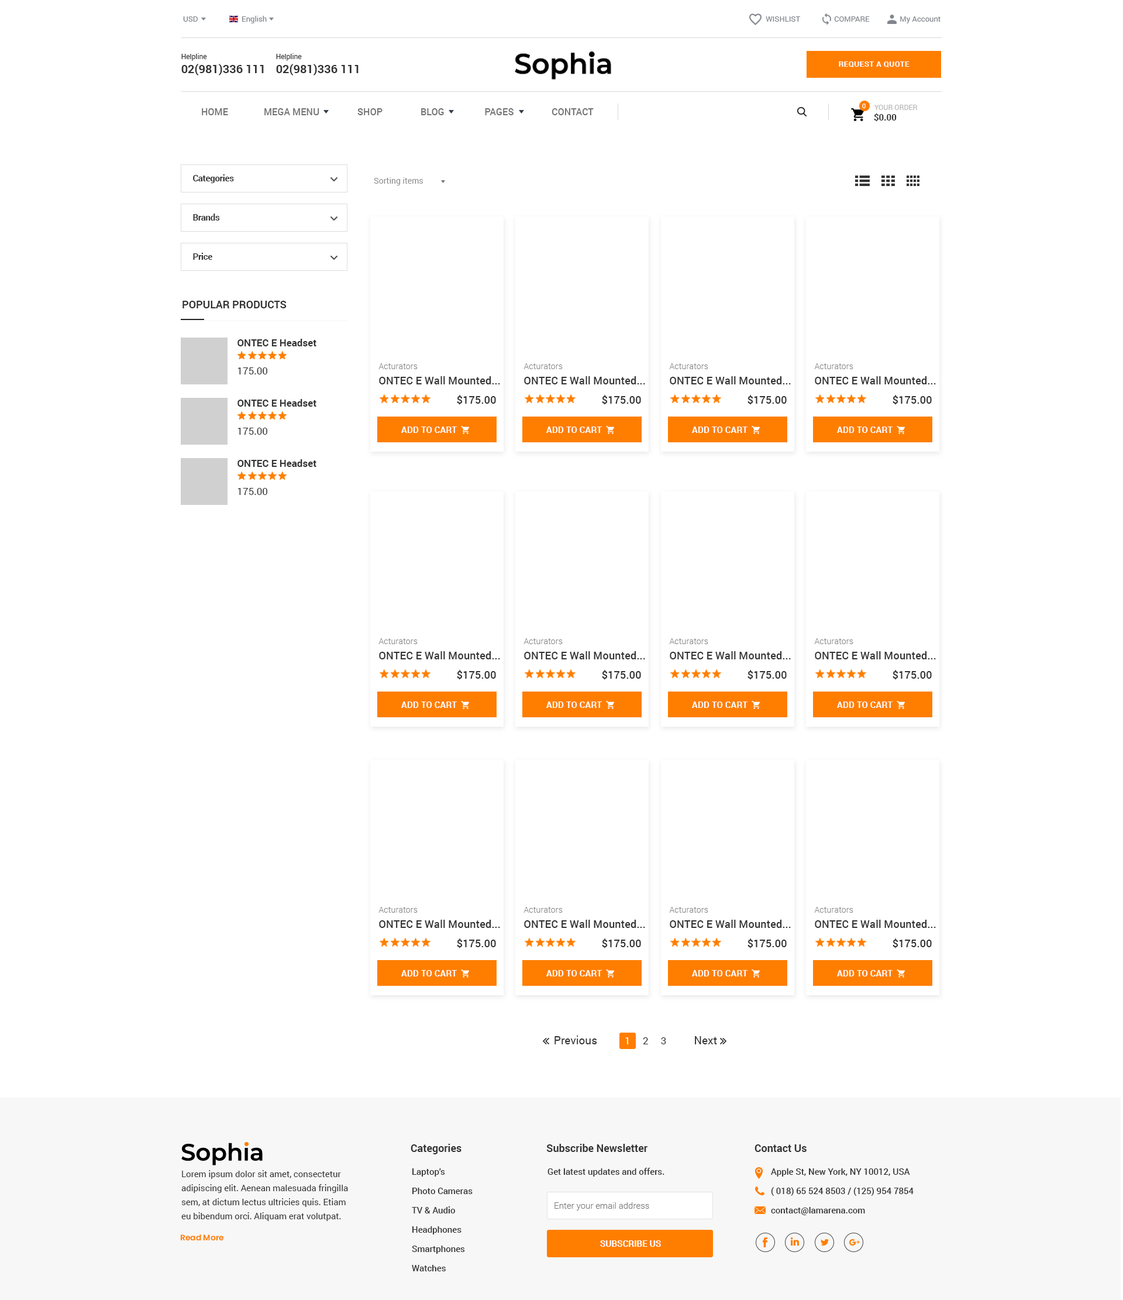
<style>
.page{position:relative;width:1123px;height:1300px;background:#ffffff}
.page>*{position:absolute;margin:0}
.t1{font:7.6px "Roboto-Regular";color:#81858c}
.t2{font:11.7px "Roboto-Bold";color:#333333}
.t3{font:7px "Roboto-Regular";color:#333333}
.t4{font:7.6px "Roboto-Bold";letter-spacing:0.04em;color:#ffffff}
.t5{font:9.4px "Roboto-Medium";color:#737373}
.t6{font:6.4px "Roboto-Regular";color:#ffffff}
.t7{font:8.8px "Roboto-Bold";color:#333333}
.t8{font:7px "Roboto-Regular";color:#b8b7b7}
.t9{font:8.5px "Roboto-Bold";color:#333333}
.t10{font:8.2px "Roboto-Regular";color:#8d8d8d}
.t11{font:10.5px "Roboto-Bold";color:#333333}
.t12{font:9.9px/15.8px "Roboto-Bold";color:#333333}
.t13{font:9.9px/28.1px "Roboto-Regular";color:#333333}
.t14{font:10.8px/15px "Roboto-Medium";color:#333333}
.t15{font:8.4px/15px "Roboto-Light";color:#848484}
.t16{font:10.8px/19.2px "Roboto-Medium";color:#333333}
.t17{font:9px "Roboto-Bold";color:#ffffff}
.t18{font:11.1px "Roboto-Regular";color:#333333}
.t19{font:9.9px "Roboto-Regular";color:#ffffff}
.t20{font:9.9px "Roboto-Regular";color:#333333}
.t21{font:8.8px/19.3px "Roboto-Medium";color:#333333}
.t22{font:8.8px "Roboto-Medium";color:#333333}
.t23{font:8.8px/14px "Roboto-Regular";color:#333333}
.t24{font:8.8px "Roboto-Light";color:#777777}
.t25{font:7.9px "Poppins-SemiBold";color:#ff7e00}
.t26{font:8.8px "Roboto-Bold";color:#ffffff}
</style>
<div class="page">
<p class="t1" style="left:183px;top:16px;width:15px;height:6px">USD</p>
<p class="t1" style="left:242px;top:16px;width:25px;height:7px">English</p>
<p class="t1" style="left:766px;top:16px;width:175px;height:7px">WISHLIST                  COMPARE                My Account</p>
<p class="t2" style="left:181px;top:53px;width:83px;height:22px"><span class="t3">Helpline<br></span>02(981)336 111</p>
<p class="t2" style="left:276px;top:53px;width:83px;height:22px"><span class="t3">Helpline<br></span>02(981)336 111</p>
<p class="t4" style="left:839px;top:61px;width:71px;height:6px">REQUEST A QUOTE</p>
<p class="t5" style="left:202px;top:108px;width:392px;height:7px">HOME               MEGA MENU                SHOP                BLOG                 PAGES                CONTACT</p>
<p class="t6" style="left:862px;top:104px;width:4px;height:4px">0</p>
<p class="t7" style="left:874px;top:113px;width:23px;height:9px">$0.00</p>
<p class="t8" style="left:875px;top:105px;width:42px;height:5px">YOUR ORDER</p>
<p class="t9" style="left:193px;top:174px;width:41px;height:9px">Categories</p>
<p class="t10" style="left:374px;top:177px;width:49px;height:8px">Sorting items</p>
<p class="t9" style="left:193px;top:214px;width:27px;height:7px">Brands</p>
<p class="t9" style="left:193px;top:253px;width:19px;height:7px">Price</p>
<p class="t11" style="left:183px;top:301px;width:104px;height:7px">POPULAR PRODUCTS</p>
<p class="t12" style="left:238px;top:339px;width:79px;height:35px">ONTEC E Headset<br><span class="t13">175.00</span></p>
<p class="t14" style="left:379px;top:363px;width:121px;height:42px"><span class="t15">Acturators<br></span>ONTEC E Wall Mounted...<br><span class="t16">                             $175.00</span></p>
<p class="t14" style="left:524px;top:363px;width:121px;height:42px"><span class="t15">Acturators<br></span>ONTEC E Wall Mounted...<br><span class="t16">                             $175.00</span></p>
<p class="t14" style="left:669px;top:363px;width:122px;height:42px"><span class="t15">Acturators<br></span>ONTEC E Wall Mounted...<br><span class="t16">                             $175.00</span></p>
<p class="t14" style="left:814px;top:363px;width:122px;height:42px"><span class="t15">Acturators<br></span>ONTEC E Wall Mounted...<br><span class="t16">                             $175.00</span></p>
<p class="t12" style="left:238px;top:399px;width:79px;height:36px">ONTEC E Headset<br><span class="t13">175.00</span></p>
<p class="t17" style="left:401px;top:427px;width:56px;height:6px">ADD TO CART</p>
<p class="t17" style="left:546px;top:427px;width:56px;height:6px">ADD TO CART</p>
<p class="t17" style="left:692px;top:427px;width:56px;height:6px">ADD TO CART</p>
<p class="t17" style="left:837px;top:427px;width:56px;height:6px">ADD TO CART</p>
<p class="t12" style="left:238px;top:459px;width:79px;height:36px">ONTEC E Headset<br><span class="t13">175.00</span></p>
<p class="t14" style="left:379px;top:638px;width:121px;height:42px"><span class="t15">Acturators<br></span>ONTEC E Wall Mounted...<br><span class="t16">                             $175.00</span></p>
<p class="t14" style="left:524px;top:638px;width:121px;height:42px"><span class="t15">Acturators<br></span>ONTEC E Wall Mounted...<br><span class="t16">                             $175.00</span></p>
<p class="t14" style="left:669px;top:638px;width:122px;height:42px"><span class="t15">Acturators<br></span>ONTEC E Wall Mounted...<br><span class="t16">                             $175.00</span></p>
<p class="t14" style="left:814px;top:638px;width:122px;height:42px"><span class="t15">Acturators<br></span>ONTEC E Wall Mounted...<br><span class="t16">                             $175.00</span></p>
<p class="t17" style="left:401px;top:702px;width:56px;height:6px">ADD TO CART</p>
<p class="t17" style="left:546px;top:702px;width:56px;height:6px">ADD TO CART</p>
<p class="t17" style="left:692px;top:702px;width:56px;height:6px">ADD TO CART</p>
<p class="t17" style="left:837px;top:702px;width:56px;height:6px">ADD TO CART</p>
<p class="t14" style="left:379px;top:907px;width:121px;height:41px"><span class="t15">Acturators<br></span>ONTEC E Wall Mounted...<br><span class="t16">                             $175.00</span></p>
<p class="t14" style="left:524px;top:907px;width:121px;height:41px"><span class="t15">Acturators<br></span>ONTEC E Wall Mounted...<br><span class="t16">                             $175.00</span></p>
<p class="t14" style="left:669px;top:907px;width:122px;height:41px"><span class="t15">Acturators<br></span>ONTEC E Wall Mounted...<br><span class="t16">                             $175.00</span></p>
<p class="t14" style="left:814px;top:907px;width:122px;height:41px"><span class="t15">Acturators<br></span>ONTEC E Wall Mounted...<br><span class="t16">                             $175.00</span></p>
<p class="t17" style="left:401px;top:970px;width:56px;height:6px">ADD TO CART</p>
<p class="t17" style="left:546px;top:970px;width:56px;height:6px">ADD TO CART</p>
<p class="t17" style="left:692px;top:970px;width:56px;height:6px">ADD TO CART</p>
<p class="t17" style="left:837px;top:970px;width:56px;height:6px">ADD TO CART</p>
<p class="t18" style="left:555px;top:1036px;width:162px;height:8px">Previous          <span class="t19">1</span><span class="t20">     2     3</span>          Next</p>
<p class="t11" style="left:411px;top:1144px;width:51px;height:10px">Categories</p>
<p class="t11" style="left:546px;top:1144px;width:102px;height:8px">Subscribe Newsletter</p>
<p class="t11" style="left:755px;top:1144px;width:52px;height:8px">Contact Us</p>
<p class="t21" style="left:412px;top:1168px;width:61px;height:103px">Laptop’s<br>Photo Cameras<br>TV &amp; Audio<br>Headphones<br>Smartphones<br>Watches</p>
<p class="t22" style="left:548px;top:1168px;width:117px;height:9px">Get latest updates and offers.</p>
<p class="t21" style="left:771px;top:1168px;width:143px;height:47px">Apple St, New York, NY 10012, USA<br>( 018) 65 524 8503 / (125) 954 7854<br>contact@lamarena.com</p>
<p class="t23" style="left:181px;top:1170px;width:167px;height:51px">Lorem ipsum dolor sit amet, consectetur adipiscing elit. Aenean malesuada fringilla sem, at dictum lectus ultricies quis. Etiam eu bibendum orci. Aliquam erat volutpat.</p>
<p class="t24" style="left:555px;top:1202px;width:94px;height:9px">Enter your email address</p>
<p class="t25" style="left:180px;top:1234px;width:44px;height:7px">Read More</p>
<p class="t26" style="left:600px;top:1240px;width:61px;height:7px">SUBSCRIBE US</p>
</div>
